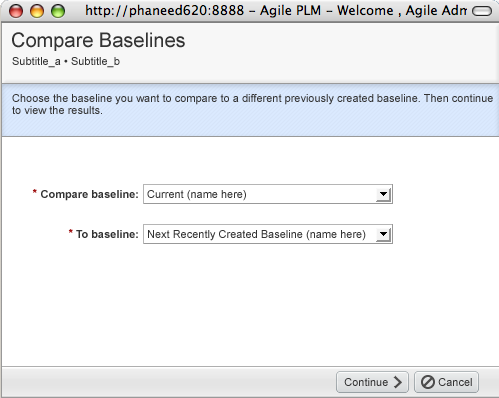
<style>
.page{position:relative;width:499px;height:398px;background:#ffffff}
.page>*{position:absolute;margin:0}
.t1{font:20px "ArialMT";color:#333333}
.t2{font:11px "ArialMT";color:#333333}
.t3{font:11px/12px "ArialMT";color:#333333}
.t4{font:11px "Arial-BoldMT";color:#990000}
.t5{font:11px "Arial-BoldMT";color:#333333}
</style>
<div class="page">
<p class="t1" style="left:12px;top:32px;width:173px;height:19px">Compare Baselines</p>
<p class="t2" style="left:12px;top:57px;width:108px;height:11px">Subtitle_a • Subtitle_b</p>
<p class="t3" style="left:12px;top:94px;width:481px;height:20px">Choose the baseline you want to compare to a different previously created baseline. Then continue <br>to view the results.</p>
<p class="t4" style="left:32px;top:189px;width:5px;height:4px">*</p>
<p class="t5" style="left:41px;top:190px;width:97px;height:11px">Compare baseline:</p>
<p class="t2" style="left:147px;top:190px;width:99px;height:11px">Current (name here)</p>
<p class="t4" style="left:68px;top:229px;width:5px;height:4px">*</p>
<p class="t5" style="left:76px;top:230px;width:62px;height:8px">To baseline:</p>
<p class="t2" style="left:148px;top:230px;width:218px;height:11px">Next Recently Created Baseline (name here)</p>
<p class="t2" style="left:344px;top:378px;width:44px;height:8px">Continue</p>
<p class="t2" style="left:438px;top:378px;width:34px;height:8px">Cancel</p>
</div>
